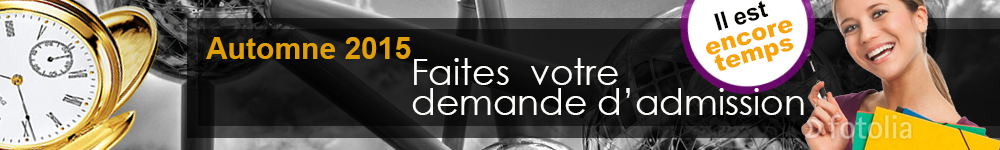
<style>
.page{position:relative;width:1000px;height:150px}
.page>*{position:absolute;margin:0}
.t1{font:24px "Arial-BoldMT";letter-spacing:-0.01em;color:#060400}
.t2{font:24px/18px "Arial-Black";color:#f5a50b}
.t3{font:30px "Arial-BoldMT";color:#de9f08}
.t4{font:36px/30px "CenturyGothic";color:#fdfcf9}
</style>
<div class="page">
<p class="t1" style="left:714px;top:0px;width:55px;height:31px;rotate:-16deg">Il est</p>
<p class="t2" style="left:706px;top:20px;width:88px;height:51px;text-align:center;rotate:-16deg">encore<br>temps</p>
<p class="t3" style="left:206px;top:37px;width:205px;height:22px">Automne 2015</p>
<p class="t4" style="left:412px;top:58px;width:392px;height:57px">Faites  votre<br>demande d’admission</p>
</div>
